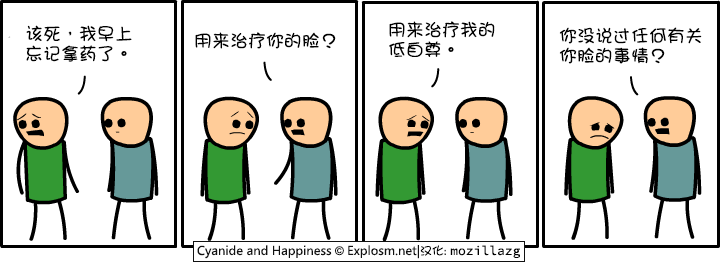
<style>
.page{position:relative;width:721px;height:262px;background:#ffffff}
.page>*{position:absolute;margin:0}
.t1{font:18px/20px "DFGirl";color:#000000}
.t2{font:18px "DFGirl";color:#000000}
</style>
<div class="page">
<p class="t1" style="left:26px;top:25px;width:106px;height:37px">该死，我早上<br>忘记拿药了。</p>
<p class="t1" style="left:389px;top:21px;width:106px;height:36px">用来治疗我的<br>低自尊。</p>
<p class="t1" style="left:559px;top:27px;width:143px;height:37px">你没说过任何有关<br>你脸的事情？</p>
<p class="t2" style="left:195px;top:32px;width:141px;height:17px">用来治疗你的脸？</p>
</div>
